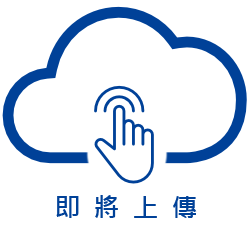
<style>
.page{position:relative;width:250px;height:226px;background:#ffffff}
.page>*{position:absolute;margin:0}
.t1{font:25.9px "MicrosoftJhengHeiBold";color:#004198}
</style>
<div class="page">
<p class="t1" style="left:56px;top:195px;width:141px;height:23px">即  將  上  傳</p>
</div>
